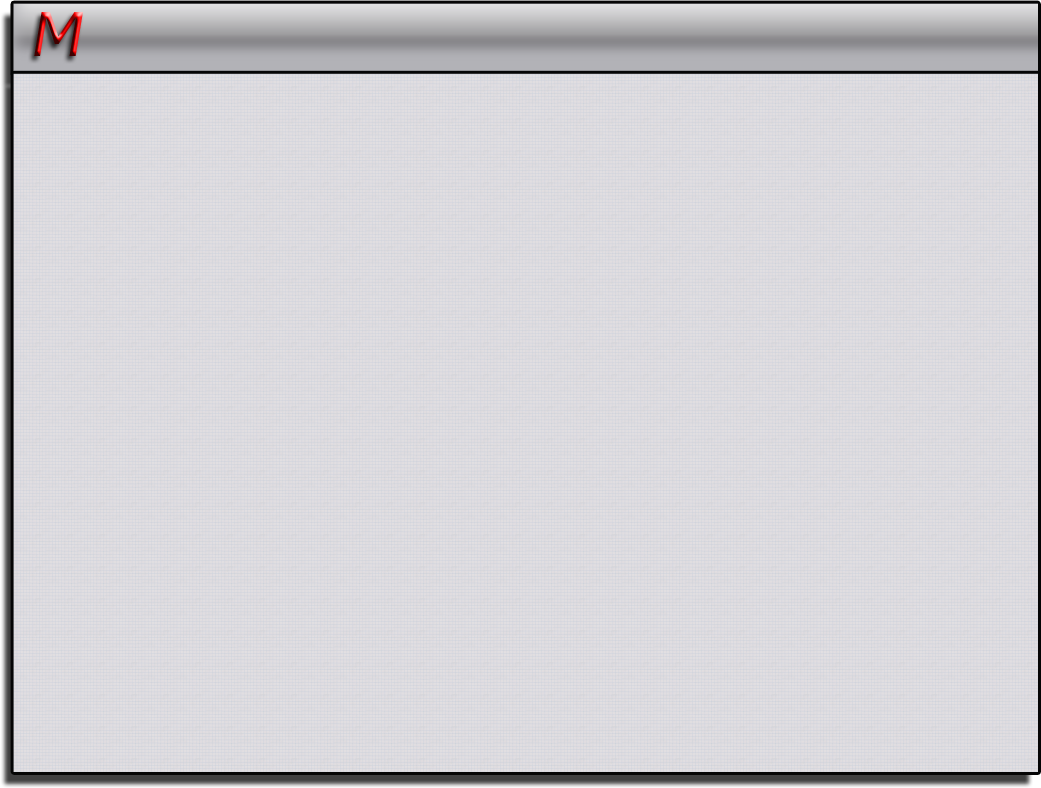
<style>
.page{position:relative;width:1041px;height:788px}
.page>*{position:absolute;margin:0}
.t1{font:61.8px "Verdana";scale:1.04 1}
</style>
<div class="page">
<p class="t1" style="left:34px;top:12px;width:49px;height:44px">M</p>
</div>
